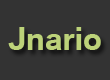
<style>
.page{position:relative;width:110px;height:80px;background:#333333}
.page>*{position:absolute;margin:0}
.t1{font:30px "BMWTypeV2Regular-Bold";color:#bcd279}
</style>
<div class="page">
<p class="t1" style="left:8px;top:27px;width:93px;height:23px">Jnario</p>
</div>
